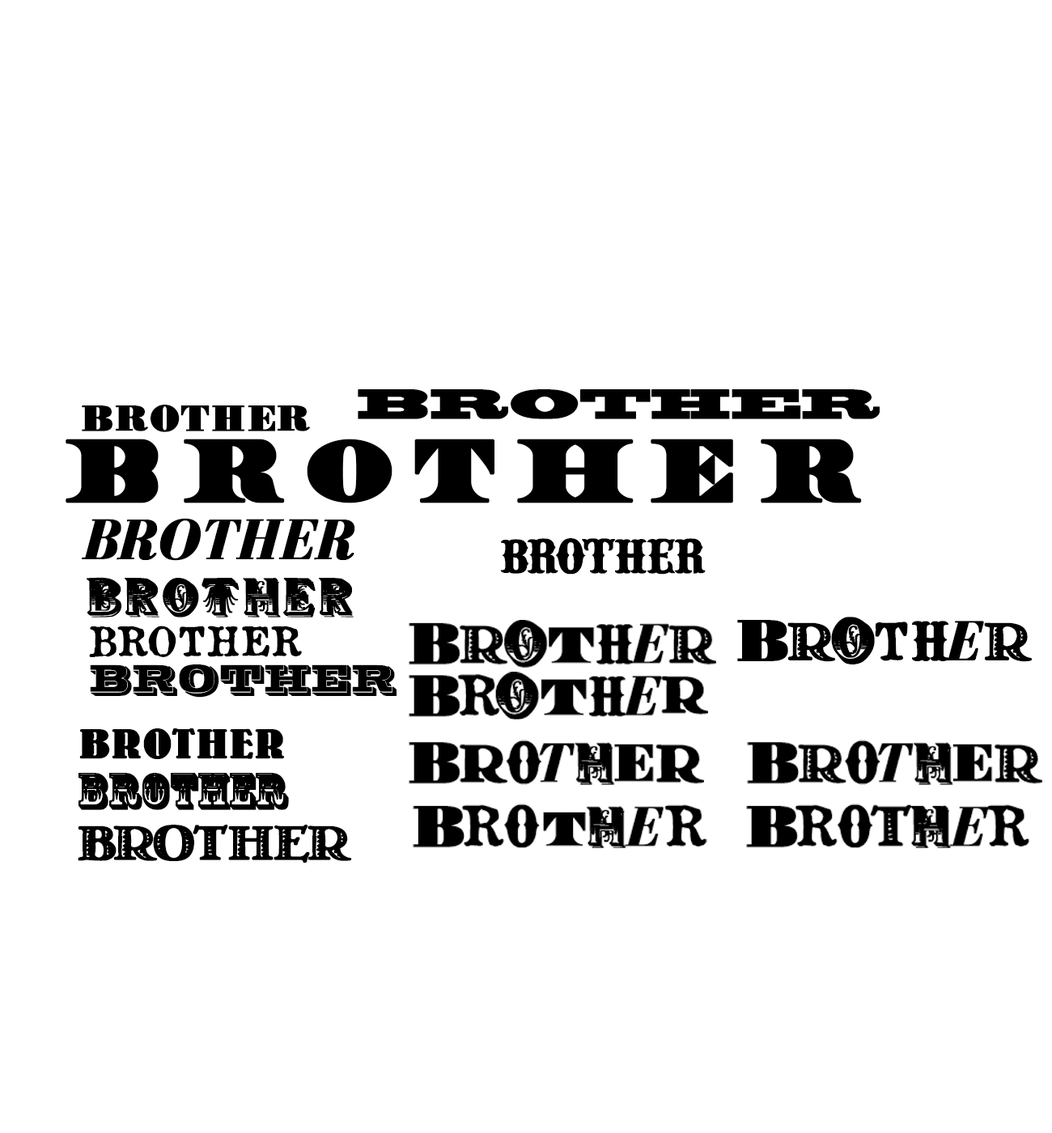
<style>
.page{position:relative;width:1052px;height:1133px;background:#ffffff}
.page>*{position:absolute;margin:0}
.t1{font:38.9px "BlackoakStd";color:#000000;text-transform:uppercase;font-weight:bold}
.t2{font:38.9px "BODIDLYbold";color:#000000;text-transform:uppercase;font-weight:bold}
.t3{font:82.6px "UnitedStates";letter-spacing:0.34em;color:#000000;text-transform:uppercase;font-weight:bold}
.t4{font:58.3px "BodoniFLF-BoldItalic";color:#000000;text-transform:uppercase;font-weight:bold}
.t5{font:48.6px "IFCRAILROAD-Bold";color:#000000;text-transform:uppercase;font-weight:bold}
.t6{font:48.6px "Showboat-Regular";color:#000000;text-transform:uppercase;font-weight:bold}
.t7{font:63.8px "BODIDLYbold";letter-spacing:-0.06em;color:#000000;text-transform:uppercase;font-weight:bold}
.t8{font:53.2px "LTNutshellLibrary";letter-spacing:-0.12em;color:#000000;text-transform:uppercase;font-weight:bold}
.t9{font:58.5px "Showboat-Regular";letter-spacing:-0.08em;color:#000000;text-transform:uppercase;font-weight:bold}
.t10{font:50px "OldNewspaperTypes";letter-spacing:0.06em;color:#000000;text-transform:uppercase;font-weight:bold}
.t11{font:56.4px "IFCRAILROAD-Bold";letter-spacing:-0.08em;color:#000000;text-transform:uppercase;font-weight:bold}
.t12{font:57.4px "BodoniFLF-BoldItalic";letter-spacing:0.04em;color:#000000;text-transform:uppercase;font-weight:bold}
.t13{font:53.2px "LTNutshellLibrary";color:#000000;text-transform:uppercase;font-weight:bold}
.t14{font:38.9px "OldNewspaperTypes";color:#000000;text-transform:uppercase;font-weight:bold}
.t15{font:58.5px "Showboat-Regular";color:#000000;text-transform:uppercase;font-weight:bold}
.t16{font:46.8px "UnitedStates";letter-spacing:0.06em;color:#000000;text-transform:uppercase;font-weight:bold}
.t17{font:38.9px "POSTOFFICE";color:#000000;text-transform:uppercase;font-weight:bold}
.t18{font:63.8px "BODIDLYbold";letter-spacing:-0.1em;color:#000000;text-transform:uppercase;font-weight:bold}
.t19{font:53.2px "OldNewspaperTypes";letter-spacing:-0.12em;color:#000000;text-transform:uppercase;font-weight:bold}
.t20{font:52.1px "LTNutshellLibraryBlack";color:#000000;text-transform:uppercase;font-weight:bold}
.t21{font:38.9px "WoodenNickelBlack";color:#000000;text-transform:uppercase;font-weight:bold}
.t22{font:53.2px "LTNutshellLibraryBlack";letter-spacing:-0.04em;color:#000000;text-transform:uppercase;font-weight:bold}
.t23{font:58.5px "IFCRAILROAD-Bold";letter-spacing:-0.14em;color:#000000;text-transform:uppercase;font-weight:bold}
.t24{font:56.4px "BodoniFLF-BoldItalic";letter-spacing:0.06em;color:#000000;text-transform:uppercase;font-weight:bold}
.t25{font:51px "Showboat-Regular";letter-spacing:-0.06em;color:#000000;text-transform:uppercase;font-weight:bold}
.t26{font:56.4px "BODIDLYbold";color:#000000;text-transform:uppercase;font-weight:bold}
.t27{font:53.2px "LTNutshellLibraryBlack";color:#000000;text-transform:uppercase;font-weight:bold}
.t28{font:53.2px "LTNutshellLibrary";letter-spacing:-0.04em;color:#000000;text-transform:uppercase;font-weight:bold}
.t29{font:48.6px "RosewoodStd-Regular";color:#000000;text-transform:uppercase;font-weight:bold}
.t30{font:53.2px "OldNewspaperTypes";color:#000000;text-transform:uppercase;font-weight:bold}
.t31{font:58.5px "IFCRAILROAD-Bold";letter-spacing:0.06em;color:#000000;text-transform:uppercase;font-weight:bold}
.t32{font:43.6px "UnitedStates";color:#000000;text-transform:uppercase;font-weight:bold}
.t33{font:51px "Showboat-Regular";letter-spacing:-0.08em;color:#000000;text-transform:uppercase;font-weight:bold}
.t34{font:58.5px "IFCRAILROAD-Bold";letter-spacing:-0.06em;color:#000000;text-transform:uppercase;font-weight:bold}
.t35{font:56.4px "LTNutshellLibrary";letter-spacing:-0.06em;color:#000000;text-transform:uppercase;font-weight:bold}
.t36{font:52.1px "Showboat-Regular";letter-spacing:-0.08em;color:#000000;text-transform:uppercase;font-weight:bold}
.t37{font:57.4px "BodoniFLF-BoldItalic";color:#000000;text-transform:uppercase;font-weight:bold}
.t38{font:48.6px "LTNutshellLibrary";color:#000000;text-transform:uppercase;font-weight:bold}
</style>
<div class="page">
<p class="t1" style="left:358px;top:389px;width:522px;height:30px">BRother</p>
<p class="t2" style="left:82px;top:405px;width:228px;height:27px">Brother</p>
<p class="t3" style="left:66px;top:439px;width:796px;height:64px">BRother</p>
<p class="t4" style="left:82px;top:518px;width:273px;height:43px">Brother</p>
<p class="t5" style="left:501px;top:538px;width:205px;height:37px">BRother</p>
<p class="t6" style="left:87px;top:577px;width:267px;height:41px">Brother</p>
<p class="t7" style="left:737px;top:617px;width:295px;height:48px">B<span class="t8">r</span><span class="t9">o</span><span class="t10">t</span><span class="t11">h</span><span class="t12">e</span><span class="t13">r</span></p>
<p class="t14" style="left:89px;top:626px;width:213px;height:31px">Brother</p>
<p class="t7" style="left:409px;top:620px;width:307px;height:48px">B<span class="t8">r</span><span class="t15">o</span><span class="t16">t</span><span class="t11">h</span><span class="t12">e</span><span class="t13">r</span></p>
<p class="t17" style="left:90px;top:665px;width:307px;height:33px">BRother</p>
<p class="t18" style="left:409px;top:672px;width:299px;height:48px">B<span class="t19">r</span><span class="t15">o</span><span class="t16">t</span><span class="t11">h</span><span class="t12">e</span><span class="t20">r</span></p>
<p class="t21" style="left:79px;top:728px;width:205px;height:31px">BRother</p>
<p class="t7" style="left:409px;top:740px;width:295px;height:45px">B<span class="t22">r</span><span class="t23">o</span><span class="t24">t</span><span class="t25">h</span><span class="t26">e</span><span class="t27">r</span></p>
<p class="t7" style="left:747px;top:740px;width:296px;height:45px">B<span class="t28">r</span><span class="t23">o</span><span class="t24">t</span><span class="t25">h</span><span class="t26">e</span><span class="t13">r</span></p>
<p class="t29" style="left:79px;top:773px;width:210px;height:37px">BRother</p>
<p class="t18" style="left:413px;top:804px;width:294px;height:44px">B<span class="t30">r</span><span class="t31">o</span><span class="t32">t</span><span class="t33">h</span><span class="t12">e</span><span class="t30">r</span></p>
<p class="t18" style="left:746px;top:804px;width:284px;height:44px">B<span class="t30">r</span><span class="t34">o</span><span class="t35">t</span><span class="t36">h</span><span class="t37">e</span><span class="t30">r</span></p>
<p class="t38" style="left:78px;top:825px;width:274px;height:38px">BRother</p>
</div>
